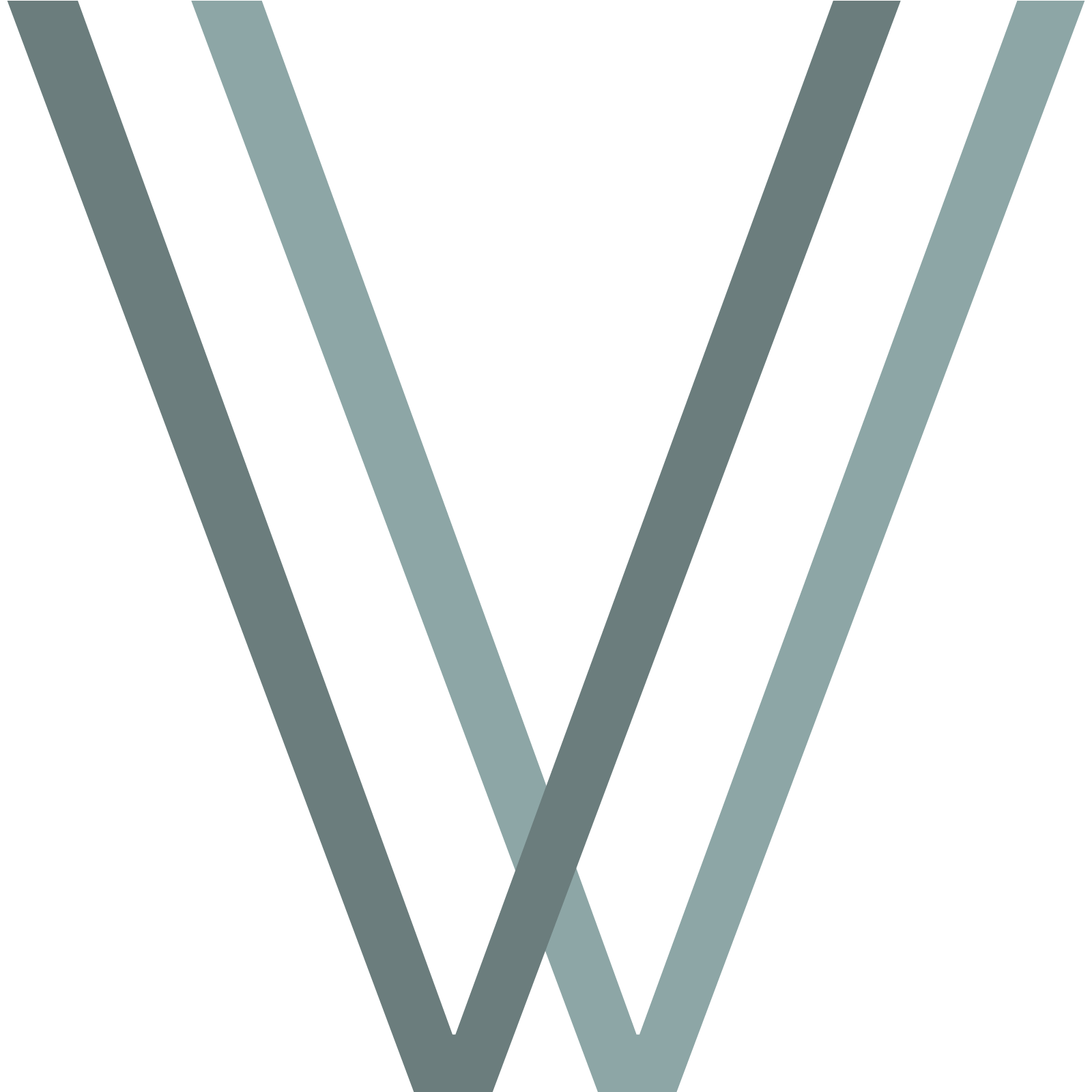
<style>
.page{position:relative;width:1092px;height:1092px;background:#ffffff}
.page>*{position:absolute;margin:0}
.t1{font:1529.3px "HelveticaNeue-Thin";color:#6b7d7d}
.t2{font:1529.3px "HelveticaNeue-Thin";color:#8da6a6}
</style>
<div class="page">
<p class="t1" style="left:7px;top:1px;width:894px;height:1092px">V</p>
<p class="t2" style="left:191px;top:1px;width:894px;height:1092px">V</p>
</div>
